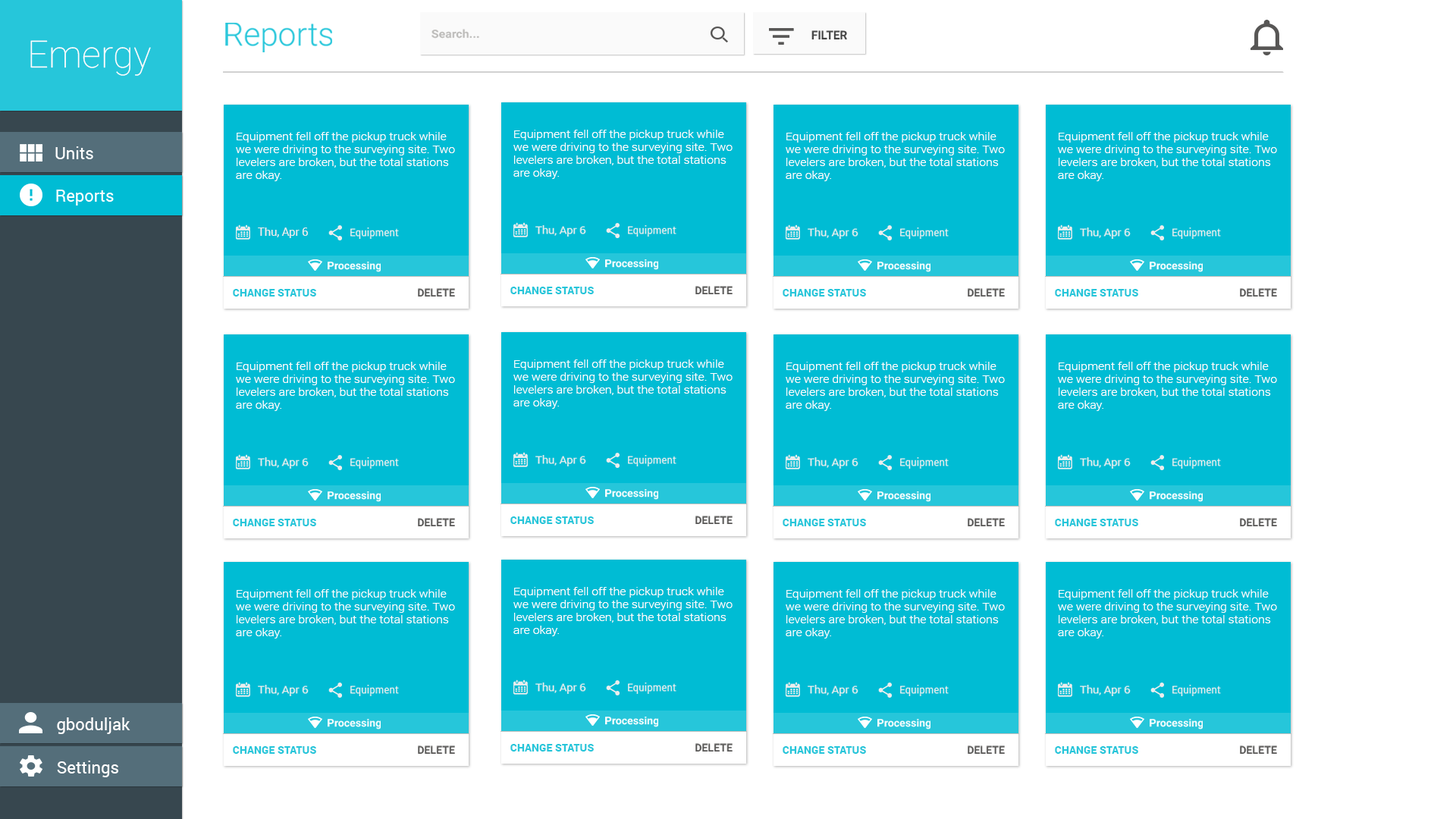
<style>
.page{position:relative;width:1456px;height:819px;background:#ffffff}
.page>*{position:absolute;margin:0}
.t1{font:32.6px "Roboto-Light";color:#26c6da}
.t2{font:11.2px "Roboto-Bold";color:#bcbbb9;scale:1.08 1}
.t3{font:37.6px "Roboto-Thin";color:#ffffff}
.t4{font:11.7px "Roboto-Bold";color:#424242}
.t5{font:10.8px "Roboto-Light";color:#ffffff;scale:1.12 1}
.t6{font:16.7px "Roboto-Regular";color:#ffffff}
.t7{font:11.2px "Roboto-Regular";color:#ededed}
.t8{font:10.4px "Roboto-Regular";color:#ebeded}
.t9{font:10.8px "Roboto-Bold";color:#fefefe}
.t10{font:10.8px "Roboto-Black";color:#26c6da}
.t11{font:10.8px "Roboto-Bold";color:#575655}
</style>
<div class="page">
<p class="t1" style="left:225px;top:23px;width:107px;height:29px">Reports</p>
<p class="t2" style="left:431px;top:29px;width:48px;height:10px">Search...</p>
<p class="t3" style="left:30px;top:40px;width:121px;height:36px">Emergy</p>
<p class="t4" style="left:811px;top:30px;width:36px;height:9px">FILTER</p>
<p class="t5" style="left:236px;top:132px;width:219px;height:49px">Equipment fell off the pickup truck while<br>we were driving to the surveying site. Two levelers are broken, but the total stations are okay.</p>
<p class="t5" style="left:513px;top:130px;width:220px;height:49px">Equipment fell off the pickup truck while<br>we were driving to the surveying site. Two levelers are broken, but the total stations are okay.</p>
<p class="t5" style="left:786px;top:132px;width:219px;height:49px">Equipment fell off the pickup truck while<br>we were driving to the surveying site. Two levelers are broken, but the total stations are okay.</p>
<p class="t5" style="left:1058px;top:132px;width:219px;height:49px">Equipment fell off the pickup truck while<br>we were driving to the surveying site. Two levelers are broken, but the total stations are okay.</p>
<p class="t6" style="left:55px;top:146px;width:38px;height:13px">Units</p>
<p class="t6" style="left:56px;top:190px;width:58px;height:16px">Reports</p>
<p class="t7" style="left:258px;top:227px;width:50px;height:11px">Thu, Apr 6</p>
<p class="t8" style="left:350px;top:227px;width:49px;height:12px">Equipment</p>
<p class="t7" style="left:535px;top:225px;width:51px;height:12px">Thu, Apr 6</p>
<p class="t8" style="left:628px;top:225px;width:48px;height:12px">Equipment</p>
<p class="t7" style="left:808px;top:227px;width:50px;height:12px">Thu, Apr 6</p>
<p class="t8" style="left:900px;top:227px;width:49px;height:12px">Equipment</p>
<p class="t7" style="left:1080px;top:227px;width:51px;height:12px">Thu, Apr 6</p>
<p class="t8" style="left:1172px;top:227px;width:49px;height:12px">Equipment</p>
<p class="t9" style="left:328px;top:262px;width:53px;height:10px">Processing</p>
<p class="t9" style="left:605px;top:259px;width:53px;height:11px">Processing</p>
<p class="t9" style="left:877px;top:262px;width:53px;height:10px">Processing</p>
<p class="t9" style="left:1150px;top:262px;width:53px;height:10px">Processing</p>
<p class="t10" style="left:233px;top:289px;width:83px;height:8px">CHANGE STATUS</p>
<p class="t11" style="left:418px;top:288px;width:37px;height:9px">DELETE</p>
<p class="t10" style="left:510px;top:287px;width:84px;height:7px">CHANGE STATUS</p>
<p class="t11" style="left:695px;top:286px;width:38px;height:8px">DELETE</p>
<p class="t10" style="left:783px;top:289px;width:83px;height:8px">CHANGE STATUS</p>
<p class="t11" style="left:968px;top:288px;width:37px;height:9px">DELETE</p>
<p class="t10" style="left:1055px;top:289px;width:83px;height:8px">CHANGE STATUS</p>
<p class="t11" style="left:1240px;top:288px;width:37px;height:9px">DELETE</p>
<p class="t5" style="left:236px;top:362px;width:219px;height:49px">Equipment fell off the pickup truck while<br>we were driving to the surveying site. Two levelers are broken, but the total stations are okay.</p>
<p class="t5" style="left:513px;top:359px;width:220px;height:50px">Equipment fell off the pickup truck while<br>we were driving to the surveying site. Two levelers are broken, but the total stations are okay.</p>
<p class="t5" style="left:786px;top:362px;width:219px;height:49px">Equipment fell off the pickup truck while<br>we were driving to the surveying site. Two levelers are broken, but the total stations are okay.</p>
<p class="t5" style="left:1058px;top:362px;width:219px;height:49px">Equipment fell off the pickup truck while<br>we were driving to the surveying site. Two levelers are broken, but the total stations are okay.</p>
<p class="t7" style="left:258px;top:457px;width:51px;height:12px">Thu, Apr 6</p>
<p class="t8" style="left:350px;top:457px;width:49px;height:12px">Equipment</p>
<p class="t7" style="left:535px;top:455px;width:51px;height:11px">Thu, Apr 6</p>
<p class="t8" style="left:628px;top:455px;width:48px;height:11px">Equipment</p>
<p class="t7" style="left:808px;top:457px;width:50px;height:12px">Thu, Apr 6</p>
<p class="t8" style="left:900px;top:457px;width:49px;height:12px">Equipment</p>
<p class="t7" style="left:1080px;top:457px;width:51px;height:12px">Thu, Apr 6</p>
<p class="t8" style="left:1172px;top:457px;width:49px;height:12px">Equipment</p>
<p class="t9" style="left:328px;top:491px;width:53px;height:11px">Processing</p>
<p class="t9" style="left:605px;top:489px;width:53px;height:11px">Processing</p>
<p class="t9" style="left:877px;top:491px;width:53px;height:11px">Processing</p>
<p class="t9" style="left:1150px;top:491px;width:53px;height:11px">Processing</p>
<p class="t10" style="left:233px;top:519px;width:83px;height:7px">CHANGE STATUS</p>
<p class="t11" style="left:418px;top:518px;width:37px;height:8px">DELETE</p>
<p class="t10" style="left:510px;top:516px;width:84px;height:8px">CHANGE STATUS</p>
<p class="t11" style="left:695px;top:516px;width:38px;height:8px">DELETE</p>
<p class="t10" style="left:783px;top:519px;width:83px;height:7px">CHANGE STATUS</p>
<p class="t11" style="left:968px;top:518px;width:37px;height:8px">DELETE</p>
<p class="t10" style="left:1055px;top:519px;width:83px;height:7px">CHANGE STATUS</p>
<p class="t11" style="left:1240px;top:518px;width:37px;height:8px">DELETE</p>
<p class="t5" style="left:236px;top:589px;width:219px;height:50px">Equipment fell off the pickup truck while<br>we were driving to the surveying site. Two levelers are broken, but the total stations are okay.</p>
<p class="t5" style="left:513px;top:587px;width:220px;height:49px">Equipment fell off the pickup truck while<br>we were driving to the surveying site. Two levelers are broken, but the total stations are okay.</p>
<p class="t5" style="left:786px;top:589px;width:219px;height:50px">Equipment fell off the pickup truck while<br>we were driving to the surveying site. Two levelers are broken, but the total stations are okay.</p>
<p class="t5" style="left:1058px;top:589px;width:219px;height:50px">Equipment fell off the pickup truck while<br>we were driving to the surveying site. Two levelers are broken, but the total stations are okay.</p>
<p class="t7" style="left:258px;top:685px;width:51px;height:11px">Thu, Apr 6</p>
<p class="t8" style="left:350px;top:685px;width:49px;height:11px">Equipment</p>
<p class="t7" style="left:535px;top:682px;width:51px;height:12px">Thu, Apr 6</p>
<p class="t8" style="left:628px;top:682px;width:48px;height:12px">Equipment</p>
<p class="t7" style="left:808px;top:685px;width:50px;height:11px">Thu, Apr 6</p>
<p class="t8" style="left:900px;top:685px;width:49px;height:11px">Equipment</p>
<p class="t7" style="left:1080px;top:685px;width:51px;height:11px">Thu, Apr 6</p>
<p class="t8" style="left:1172px;top:685px;width:49px;height:11px">Equipment</p>
<p class="t6" style="left:57px;top:717px;width:73px;height:17px">gboduljak</p>
<p class="t9" style="left:328px;top:719px;width:53px;height:11px">Processing</p>
<p class="t9" style="left:605px;top:717px;width:53px;height:10px">Processing</p>
<p class="t9" style="left:877px;top:719px;width:53px;height:11px">Processing</p>
<p class="t9" style="left:1150px;top:719px;width:53px;height:11px">Processing</p>
<p class="t10" style="left:233px;top:746px;width:83px;height:8px">CHANGE STATUS</p>
<p class="t11" style="left:418px;top:745px;width:37px;height:9px">DELETE</p>
<p class="t10" style="left:510px;top:744px;width:84px;height:7px">CHANGE STATUS</p>
<p class="t11" style="left:695px;top:743px;width:38px;height:8px">DELETE</p>
<p class="t10" style="left:783px;top:746px;width:83px;height:8px">CHANGE STATUS</p>
<p class="t11" style="left:968px;top:745px;width:37px;height:9px">DELETE</p>
<p class="t10" style="left:1055px;top:746px;width:83px;height:8px">CHANGE STATUS</p>
<p class="t11" style="left:1240px;top:745px;width:37px;height:9px">DELETE</p>
<p class="t6" style="left:57px;top:761px;width:61px;height:16px">Settings</p>
</div>
